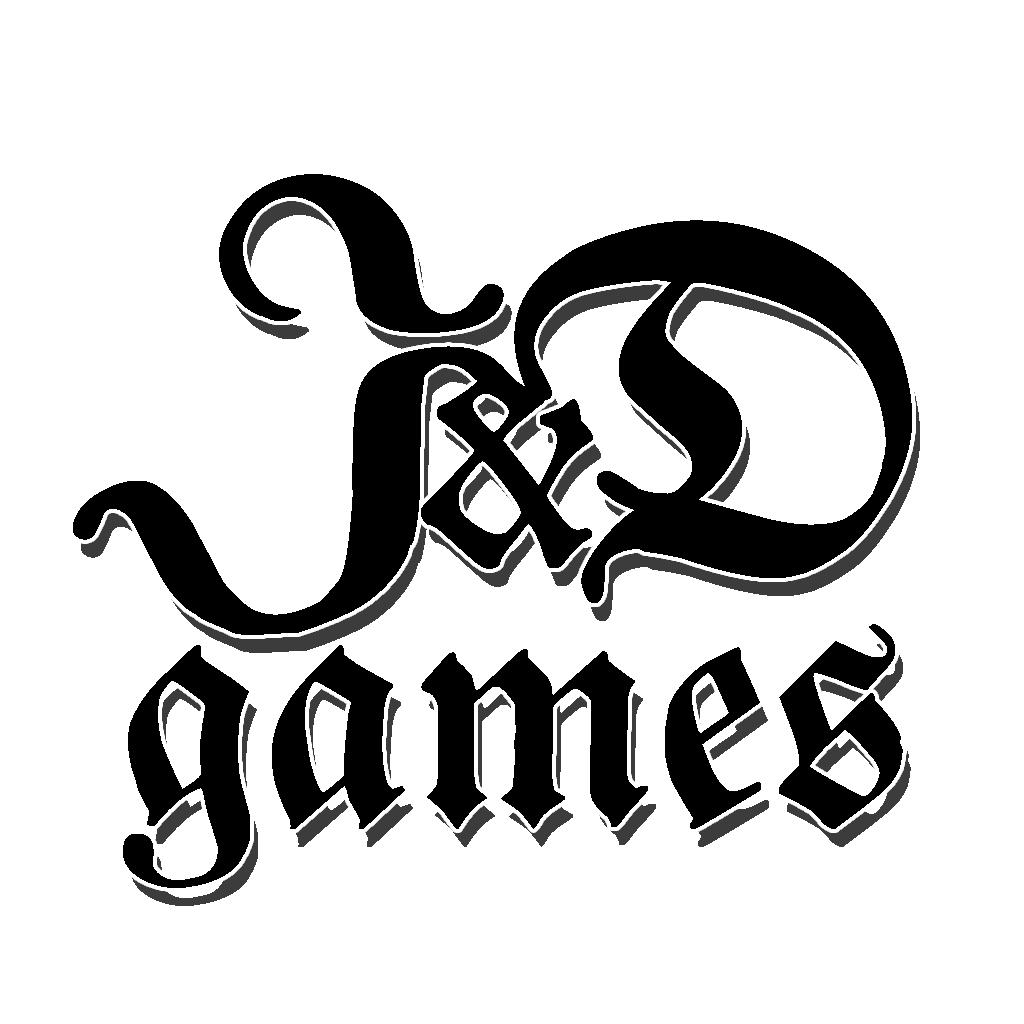
<style>
.page{position:relative;width:1024px;height:1024px;background:#ffffff}
.page>*{position:absolute;margin:0}
.t1{font:585.2px "BreitkopfFraktur";color:#000000}
.t2{font:333.1px "BreitkopfFraktur";color:#000000}
.t3{font:412.4px "BreitkopfFraktur";color:#000000}
</style>
<div class="page">
<p class="t1" style="left:73px;top:174px;width:431px;height:461px;rotate:26deg">J</p>
<p class="t1" style="left:514px;top:220px;width:398px;height:383px;rotate:-14deg">D</p>
<p class="t2" style="left:421px;top:363px;width:172px;height:206px">&amp;</p>
<p class="t3" style="left:123px;top:624px;width:780px;height:264px">games</p>
</div>
